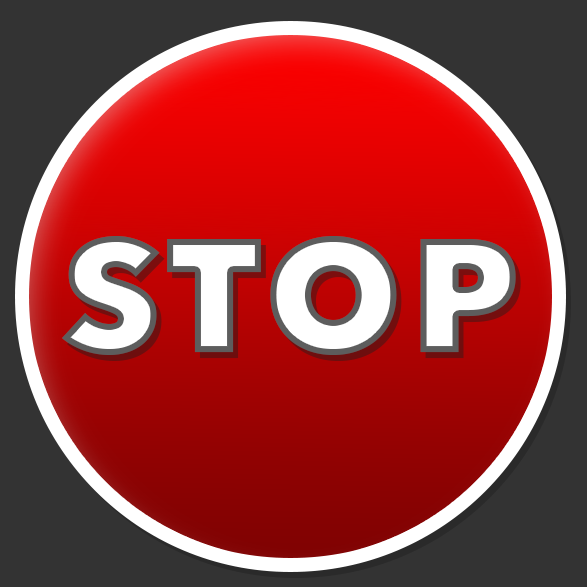
<style>
.page{position:relative;width:587px;height:587px;background:#333333}
.page>*{position:absolute;margin:0}
.t1{font:160px "AvenirNext-Heavy";letter-spacing:0.06em;color:#ffffff}
</style>
<div class="page">
<p class="t1" style="left:62px;top:236px;width:454px;height:119px">STOP</p>
</div>
